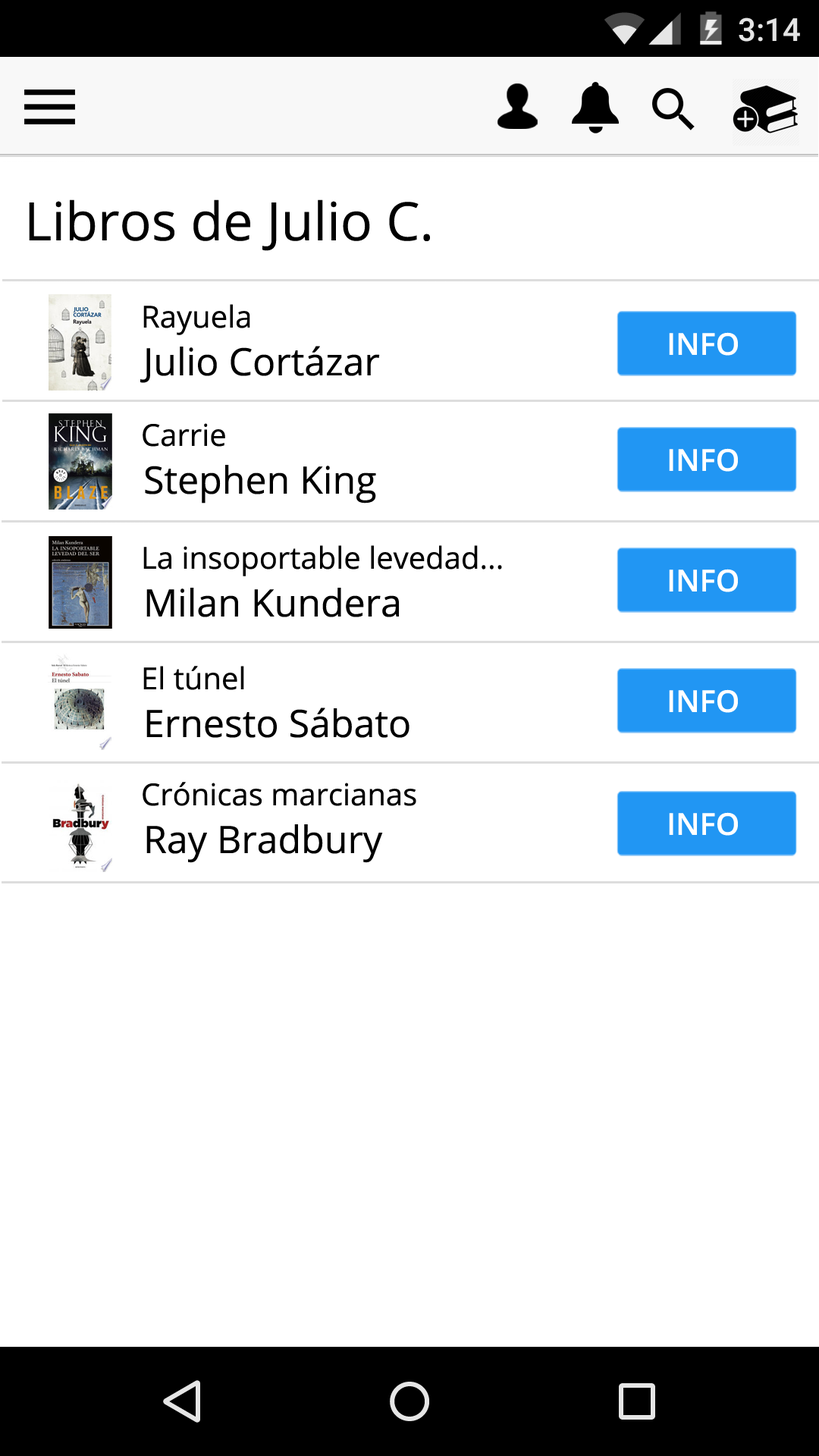
<style>
.page{position:relative;width:819px;height:1456px;background:#ffffff}
.page>*{position:absolute;margin:0}
.t1{font:53.1px "OpenSans";color:#000000}
.t2{font:30.3px "OpenSans";color:#000000}
.t3{font:30.3px "OpenSans-Semibold";color:#ffffff}
.t4{font:37.9px "OpenSans";color:#000000}
</style>
<div class="page">
<p class="t1" style="left:29px;top:199px;width:401px;height:52px">Libros de Julio C.</p>
<p class="t2" style="left:143px;top:304px;width:107px;height:31px">Rayuela</p>
<p class="t3" style="left:669px;top:332px;width:69px;height:24px">INFO</p>
<p class="t4" style="left:140px;top:346px;width:240px;height:37px">Julio Cortázar</p>
<p class="t2" style="left:143px;top:423px;width:82px;height:24px">Carrie</p>
<p class="t3" style="left:669px;top:448px;width:69px;height:24px">INFO</p>
<p class="t4" style="left:145px;top:465px;width:231px;height:39px">Stephen King</p>
<p class="t2" style="left:143px;top:545px;width:359px;height:31px">La insoportable levedad...</p>
<p class="t3" style="left:669px;top:569px;width:69px;height:23px">INFO</p>
<p class="t4" style="left:146px;top:588px;width:253px;height:29px">Milan Kundera</p>
<p class="t2" style="left:143px;top:666px;width:101px;height:24px">El túnel</p>
<p class="t3" style="left:669px;top:689px;width:69px;height:24px">INFO</p>
<p class="t4" style="left:146px;top:708px;width:263px;height:30px">Ernesto Sábato</p>
<p class="t2" style="left:143px;top:782px;width:273px;height:24px">Crónicas marcianas</p>
<p class="t3" style="left:669px;top:812px;width:69px;height:24px">INFO</p>
<p class="t4" style="left:146px;top:824px;width:237px;height:39px">Ray Bradbury</p>
</div>
